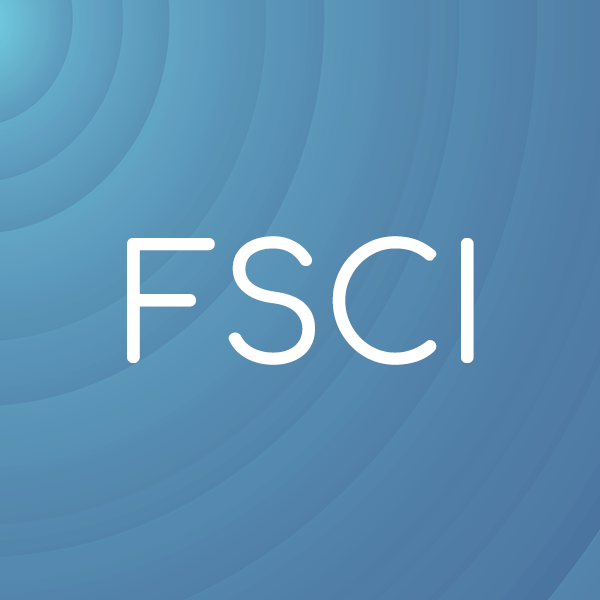
<style>
.page{position:relative;width:600px;height:600px}
.page>*{position:absolute;margin:0}
.t1{font:160px "Comfortaa-Regular";letter-spacing:-0.01em;color:#ffffff}
</style>
<div class="page">
<p class="t1" style="left:127px;top:236px;width:347px;height:129px">FSCI</p>
</div>
